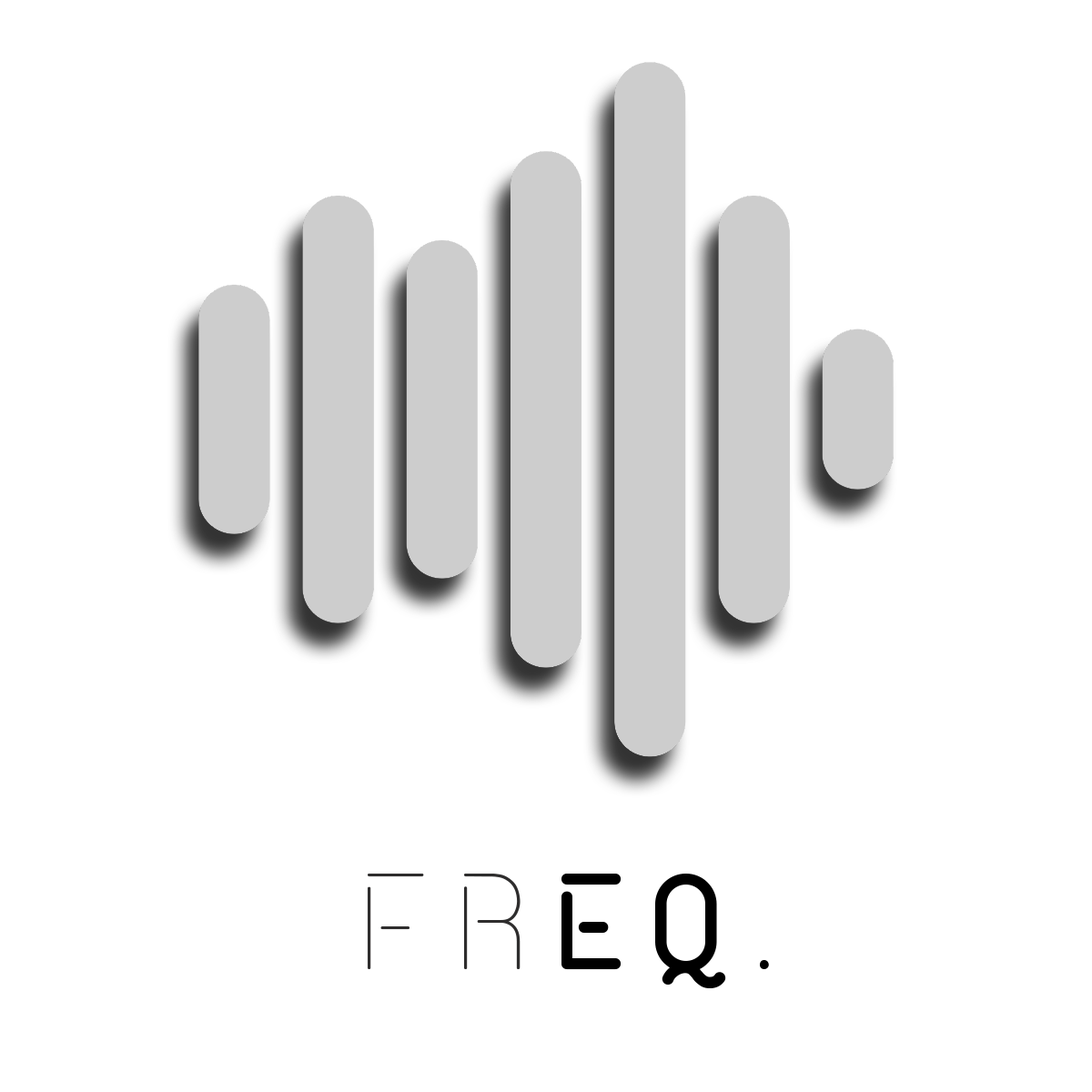
<style>
.page{position:relative;width:1092px;height:1092px;background:#ffffff}
.page>*{position:absolute;margin:0}
.t1{font:136.5px "CettaSansTypefamily-Light";letter-spacing:0.2em;color:#2e2d2d}
.t2{font:136.5px "CettaSansTypefamily-ExtraBold";letter-spacing:0.2em;color:#000000}
.t3{font:136.5px "CettaSansTypefamily-Light";letter-spacing:0.2em;color:#000000}
</style>
<div class="page">
<p class="t1" style="left:368px;top:874px;width:401px;height:114px">fr<span class="t2">eq</span><span class="t3">.</span></p>
</div>
